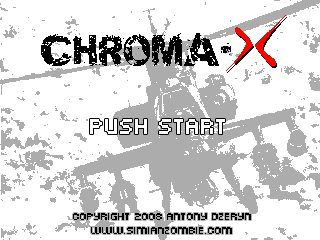
<style>
.page{position:relative;width:320px;height:240px;background:#ffffff}
.page>*{position:absolute;margin:0}
.t1{font:36px "SoulMission";color:#000000}
.t2{font:24px "PFArmaFive";color:#ffffff}
.t3{font:11px "PFArmaFive";color:#000000}
</style>
<div class="page">
<p class="t1" style="left:41px;top:33px;width:178px;height:33px">CHROMA</p>
<p class="t2" style="left:90px;top:119px;width:135px;height:15px">PUSH START</p>
<p class="t3" style="left:73px;top:213px;width:178px;height:21px;text-align:center">Copyright 2008 ANTONY DZERYN<br>www.simianzombie.com</p>
</div>
